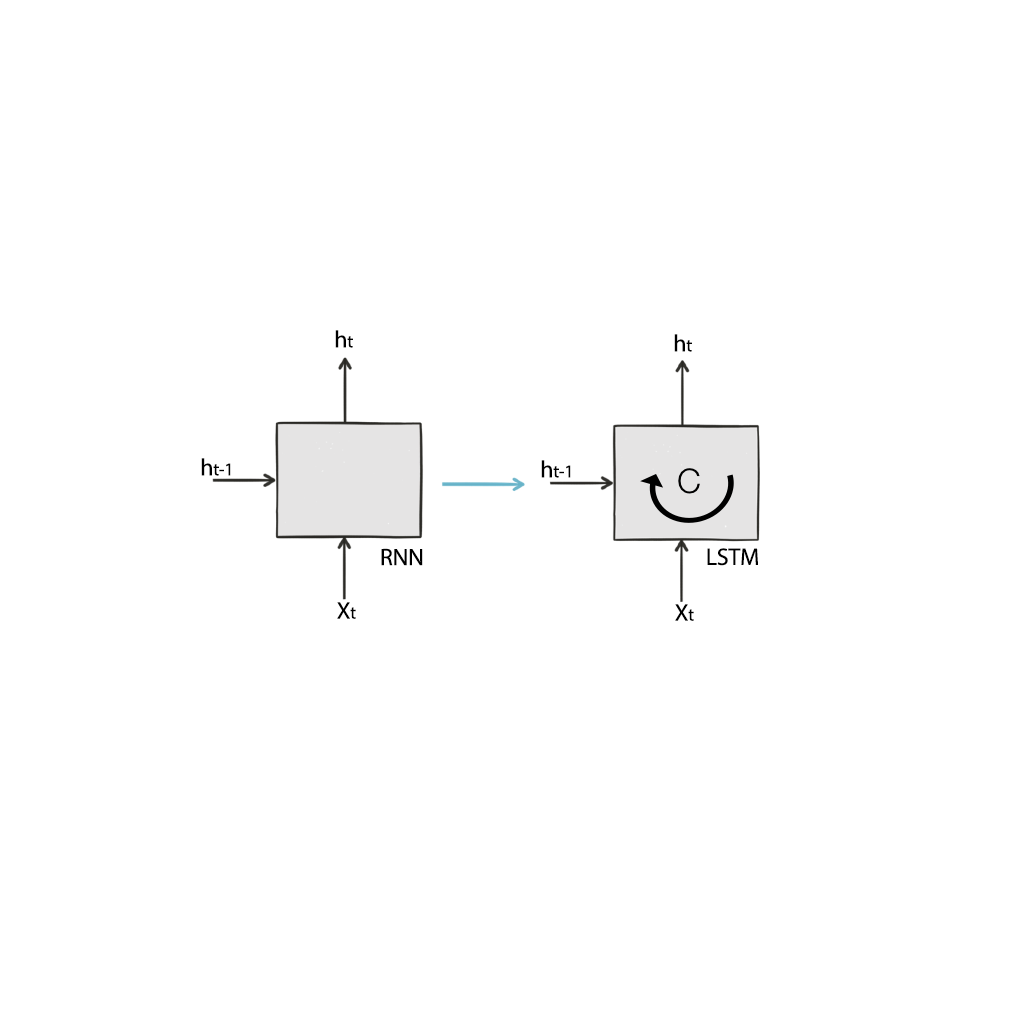
<style>
.page{position:relative;width:1024px;height:1024px;background:#ffffff}
.page>*{position:absolute;margin:0}
.t1{font:24px "MyriadPro-Regular";letter-spacing:-0.01em;color:#000000}
.t2{font:18px "MyriadPro-Regular";letter-spacing:-0.01em;color:#000000}
</style>
<div class="page">
<p class="t1" style="left:335px;top:330px;width:18px;height:18px">h<span class="t2">t</span></p>
<p class="t1" style="left:674px;top:334px;width:18px;height:18px">h<span class="t2">t</span></p>
<p class="t2" style="left:201px;top:458px;width:30px;height:18px"><span class="t1">h</span>t-1</p>
<p class="t2" style="left:541px;top:460px;width:30px;height:18px"><span class="t1">h</span>t-1</p>
<p class="t1" style="left:381px;top:548px;width:42px;height:18px">RNN</p>
<p class="t1" style="left:707px;top:548px;width:51px;height:18px">LSTM</p>
<p class="t1" style="left:337px;top:602px;width:19px;height:17px">X<span class="t2">t</span></p>
<p class="t1" style="left:675px;top:604px;width:19px;height:17px">X<span class="t2">t</span></p>
</div>
